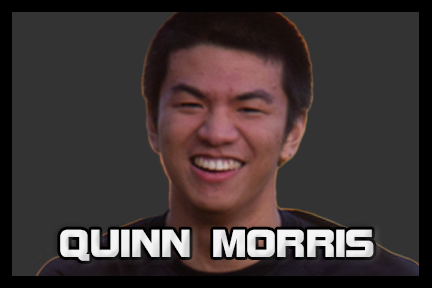
<style>
.page{position:relative;width:432px;height:288px;background:#333333}
.page>*{position:absolute;margin:0}
.t1{font:41.7px "BolsterBold";color:#f3f3f3}
</style>
<div class="page">
<p class="t1" style="left:60px;top:229px;width:314px;height:32px">QUINN MORRIS</p>
</div>
